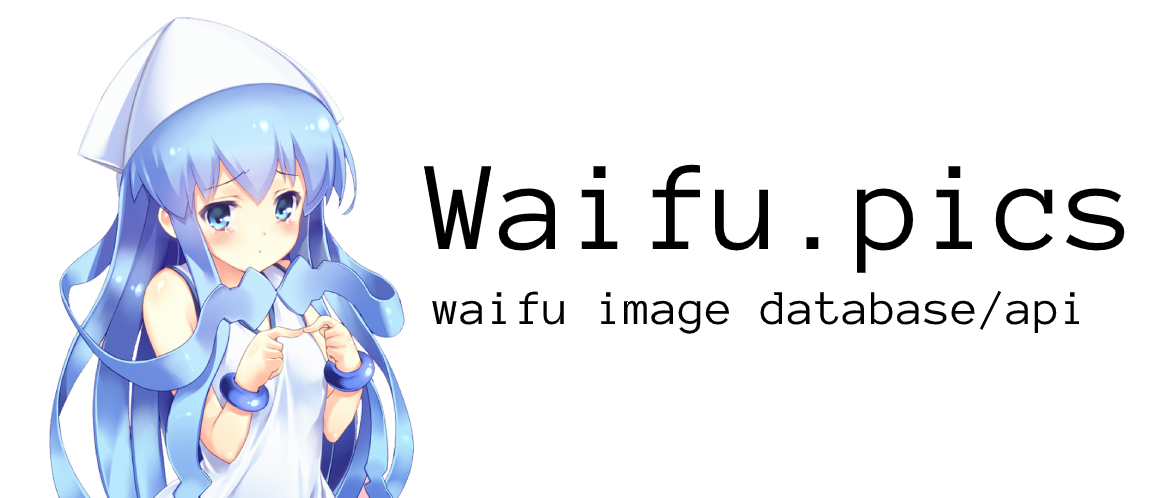
<style>
.page{position:relative;width:1173px;height:498px;background:#ffffff}
.page>*{position:absolute;margin:0}
.t1{font:130px "AnonymousPro-Regular";color:#000000}
.t2{font:50px "AnonymousPro-Regular";color:#000000}
</style>
<div class="page">
<p class="t1" style="left:424px;top:164px;width:701px;height:109px">Waifu.pics</p>
<p class="t2" style="left:432px;top:290px;width:647px;height:44px">waifu image database/api</p>
</div>
